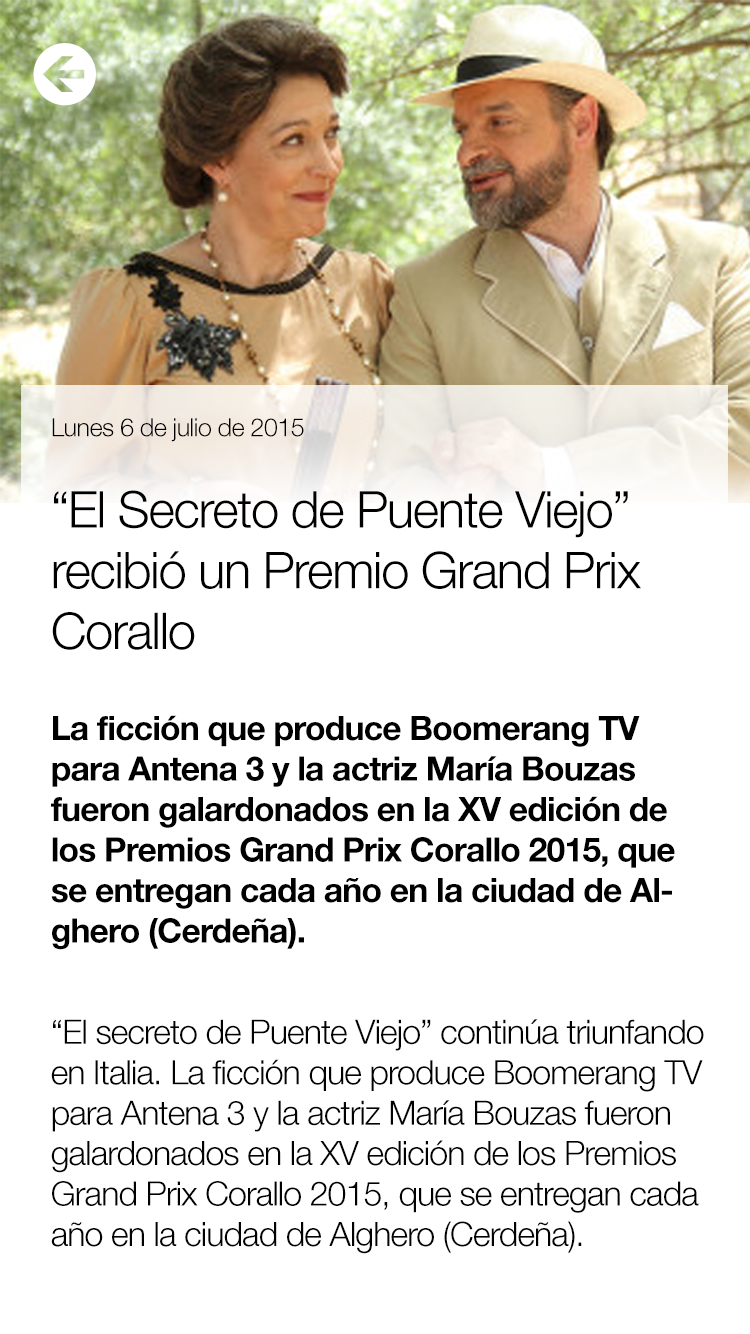
<style>
.page{position:relative;width:750px;height:1334px;background:#ffffff}
.page>*{position:absolute;margin:0}
.t1{font:84.3px "MercuryNumericG1-Roman";letter-spacing:-0.025em;color:#ffffff}
.t2{font:33.7px "HelveticaNeue-Light";letter-spacing:-0.025em;color:#000000}
.t3{font:25.3px "HelveticaNeue-Light";letter-spacing:-0.025em;color:#000000}
.t4{font:50.6px "HelveticaNeue-Light";letter-spacing:-0.025em;color:#000000}
.t5{font:33.7px "HelveticaNeue-Bold";letter-spacing:-0.025em;color:#000000}
</style>
<div class="page">
<p class="t1" style="left:33px;top:43px;width:63px;height:63px">o</p>
<p class="t2" style="left:51px;top:418px;width:653px;height:836px"><span class="t3">Lunes 6 de julio de 2015<br><br></span><span class="t4">“El Secreto de Puente Viejo” <br>recibió un Premio Grand Prix Corallo<br><br></span><span class="t5">La ficción que produce Boomerang TV para Antena 3 y la actriz María Bouzas fueron galardonados en la XV edición de los Premios Grand Prix Corallo 2015, que se entregan cada año en la ciudad de Alghero (Cerdeña).<br><br><br></span>“El secreto de Puente Viejo” continúa triunfando en Italia. La ficción que produce Boomerang TV para Antena 3 y la actriz María Bouzas fueron galardonados en la XV edición de los Premios Grand Prix Corallo 2015, que se entregan cada año en la ciudad de Alghero (Cerdeña).<br><br>Bouzas fue reconocida por la “profesionalidad demostrada en la interpretación del personaje de Doña Francisca”, y recibió el fin de semana el Premio Especial “Catalunya”, mientras que “El secreto de Puente Viejo” ganó el premio “Ficción”. Los Premios Grand Prix Corallo 2015 son organizados por Asd Valverde con la colaboración de Rai y Sky, y patrocinados por la Comunidad de Alghero. La ceremonia es un importante punto de referencia entre los eventos que se celebran en Cerdeña.</p>
</div>
